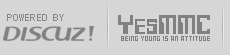
<style>
.page{position:relative;width:230px;height:55px;background:#d6d6d6}
.page>*{position:absolute;margin:0}
.t1{font:24px "KeypunchPlain";color:#818181}
.t2{font:8px "04b24";color:#818181}
</style>
<div class="page">
<p class="t1" style="left:118px;top:15px;width:92px;height:19px">YesMMC</p>
<p class="t2" style="left:121px;top:36px;width:89px;height:5px">BEING YOUNG IS AN ATTITUDE</p>
</div>
